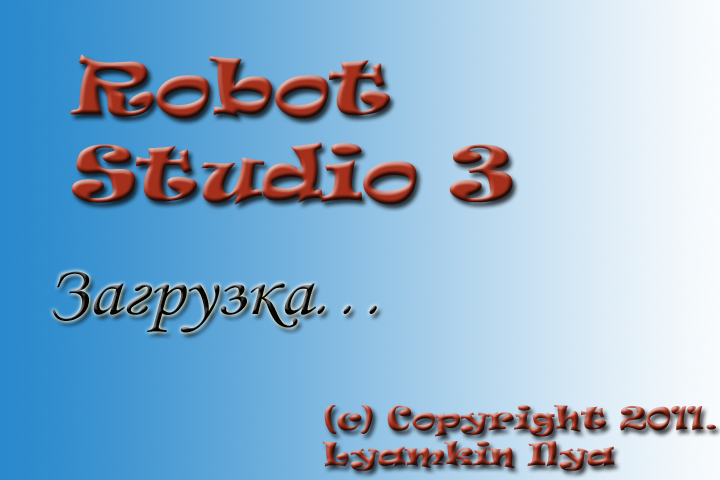
<style>
.page{position:relative;width:720px;height:480px}
.page>*{position:absolute;margin:0}
.t1{font:72px "Ravie";scale:1.1 1}
.t2{font:72px "MonotypeCorsiva";color:#090909;scale:1.1 1}
.t3{font:72px "BrushScriptMT";color:#090909;scale:1.1 1}
.t4{font:30px "Ravie";scale:1.1 1}
</style>
<div class="page">
<p class="t1" style="left:70px;top:54px;width:443px;height:151px">Robot<br>Studio 3</p>
<p class="t2" style="left:52px;top:271px;width:325px;height:62px">Загрузка<span class="t3">...</span></p>
<p class="t4" style="left:322px;top:404px;width:394px;height:67px">(c) Copyright 2011. Lyamkin Ilya</p>
</div>
